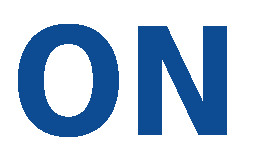
<style>
.page{position:relative;width:256px;height:161px;background:#ffffff}
.page>*{position:absolute;margin:0}
.t1{font:150px "DejaVuSansCondensed-Bold";color:#0d4c92}
</style>
<div class="page">
<p class="t1" style="left:18px;top:24px;width:209px;height:113px">ON</p>
</div>
